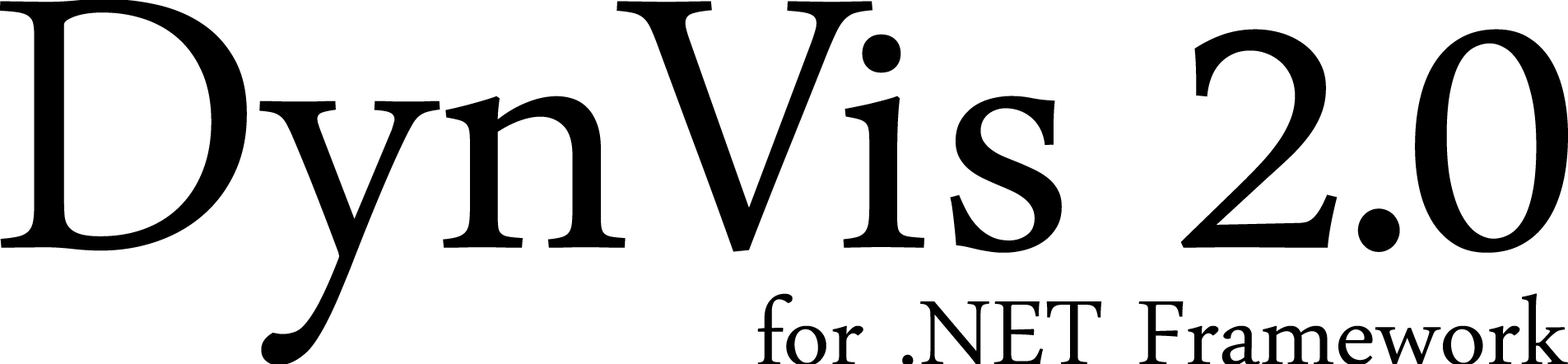
<style>
.page{position:relative;width:1568px;height:364px;background:#ffffff}
.page>*{position:absolute;margin:0}
.t1{font:525.1px "DaunPenh";color:#000000}
.t2{font:135px "DaunPenh";color:#000000}
</style>
<div class="page">
<p class="t1" style="left:0px;top:0px;width:872px;height:364px">DynV</p>
<p class="t1" style="left:950px;top:29px;width:618px;height:224px">s 2.0</p>
<p class="t2" style="left:757px;top:293px;width:811px;height:71px">for .NET Framework</p>
</div>
